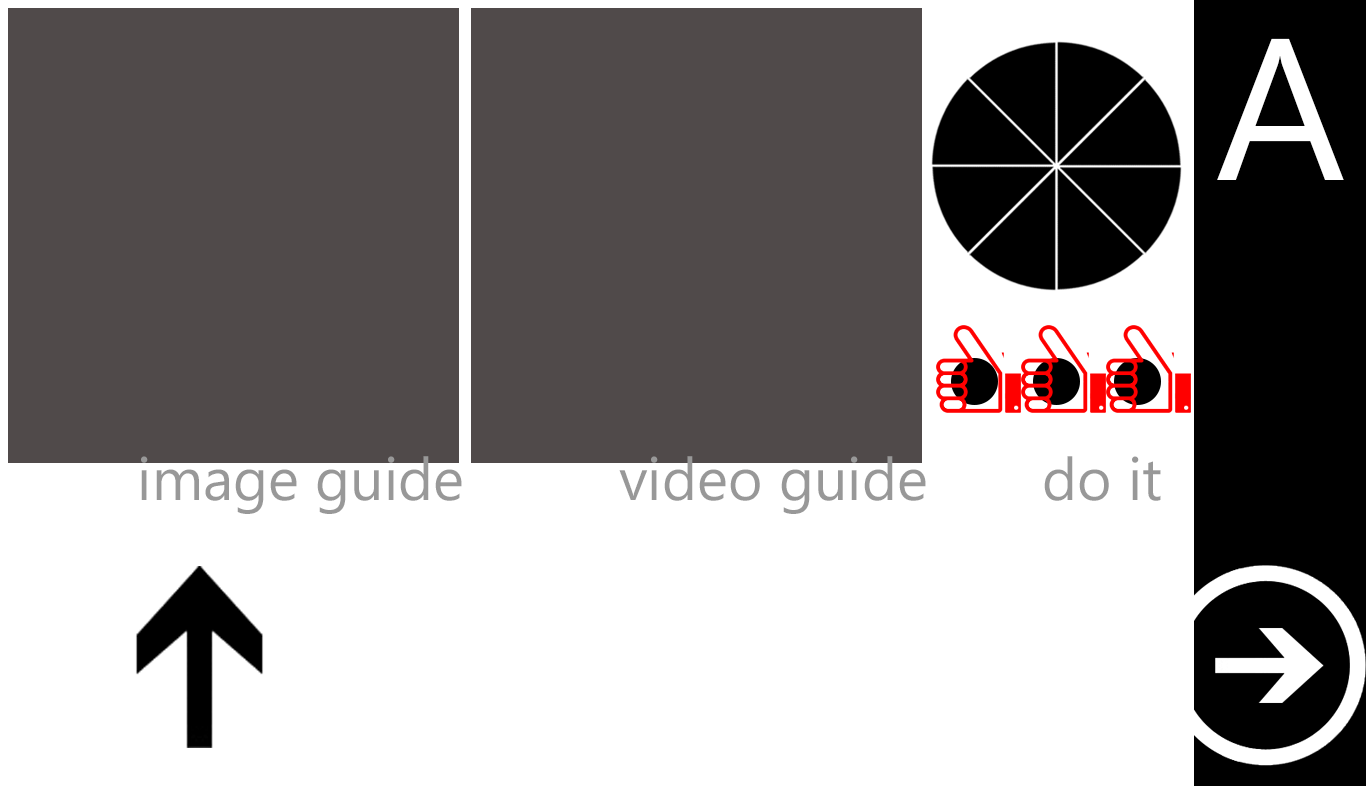
<style>
.page{position:relative;width:1366px;height:786px;background:#ffffff}
.page>*{position:absolute;margin:0}
.t1{font:202.2px "SegoeUI";color:#ffffff}
.t2{font:59.3px "SegoeUI";color:#989898}
</style>
<div class="page">
<p class="t1" style="left:1217px;top:38px;width:127px;height:142px">A</p>
<p class="t2" style="left:141px;top:456px;width:321px;height:58px">image guide</p>
<p class="t2" style="left:619px;top:456px;width:307px;height:58px">video guide</p>
<p class="t2" style="left:1044px;top:456px;width:117px;height:45px">do it</p>
</div>
